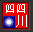
<style>
.page{position:relative;width:33px;height:32px;background:#f20000}
.page>*{position:absolute;margin:0}
.t1{font:10.4px "SimSun";color:#ffffff}
.t2{font:11.7px "SimSun";color:#ffffff}
</style>
<div class="page">
<p class="t1" style="left:6px;top:4px;width:19px;height:9px">四四</p>
<p class="t2" style="left:16px;top:15px;width:11px;height:12px">川</p>
</div>
